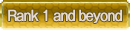
<style>
.page{position:relative;width:130px;height:30px}
.page>*{position:absolute;margin:0}
.t1{font:14px "GothicMB101Pro-Regular";letter-spacing:-0.08em;color:#e6dad2;font-weight:bold;scale:0.9 1}
</style>
<div class="page">
<p class="t1" style="left:8px;top:9px;width:114px;height:14px">Rank 1 and beyond</p>
</div>
